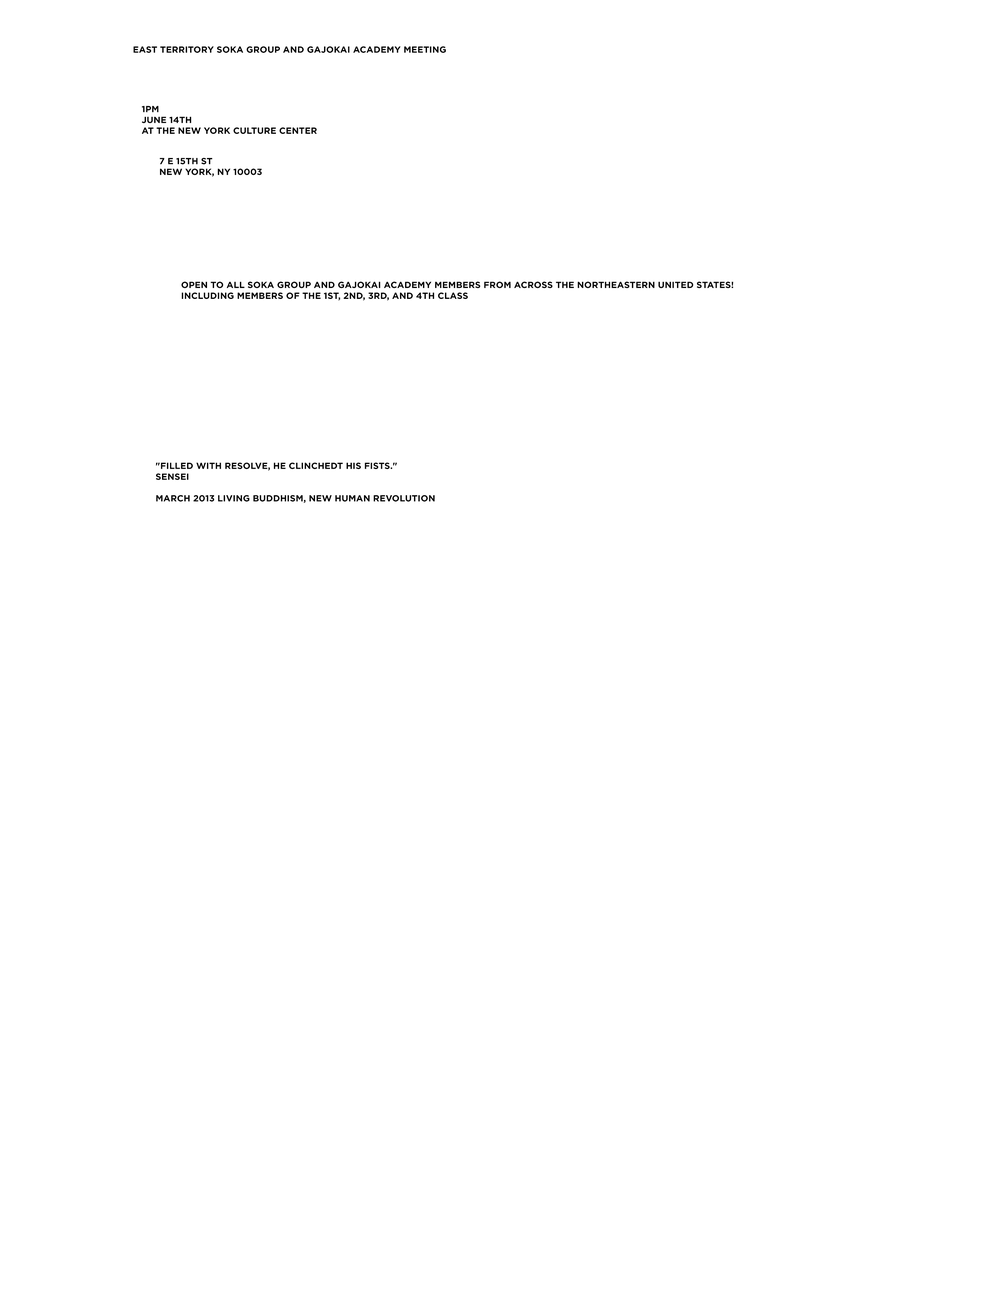
<style>
.page{position:relative;width:998px;height:1291px;background:#ffffff}
.page>*{position:absolute;margin:0}
.t1{font:9px "Gotham-Bold";color:#000000;text-transform:uppercase}
</style>
<div class="page">
<p class="t1" style="left:133px;top:46px;width:313px;height:7px">East Territory Soka Group and Gajokai Academy Meeting</p>
<p class="t1" style="left:142px;top:106px;width:175px;height:28px">1pm<br>June 14th <br>at the New York Culture Center</p>
<p class="t1" style="left:160px;top:158px;width:102px;height:18px">7 E 15th St<br>New York, NY 10003</p>
<p class="t1" style="left:181px;top:282px;width:552px;height:19px">Open to all Soka Group and Gajokai Academy Members from across the Northeastern United States! <br>Including Members of the 1st, 2nd, 3rd, and 4th Class</p>
<p class="t1" style="left:156px;top:463px;width:279px;height:40px">"Filled with resolve, he clinchedt his fists." <br>Sensei<br><br>March 2013 Living Buddhism, New Human Revolution</p>
</div>
